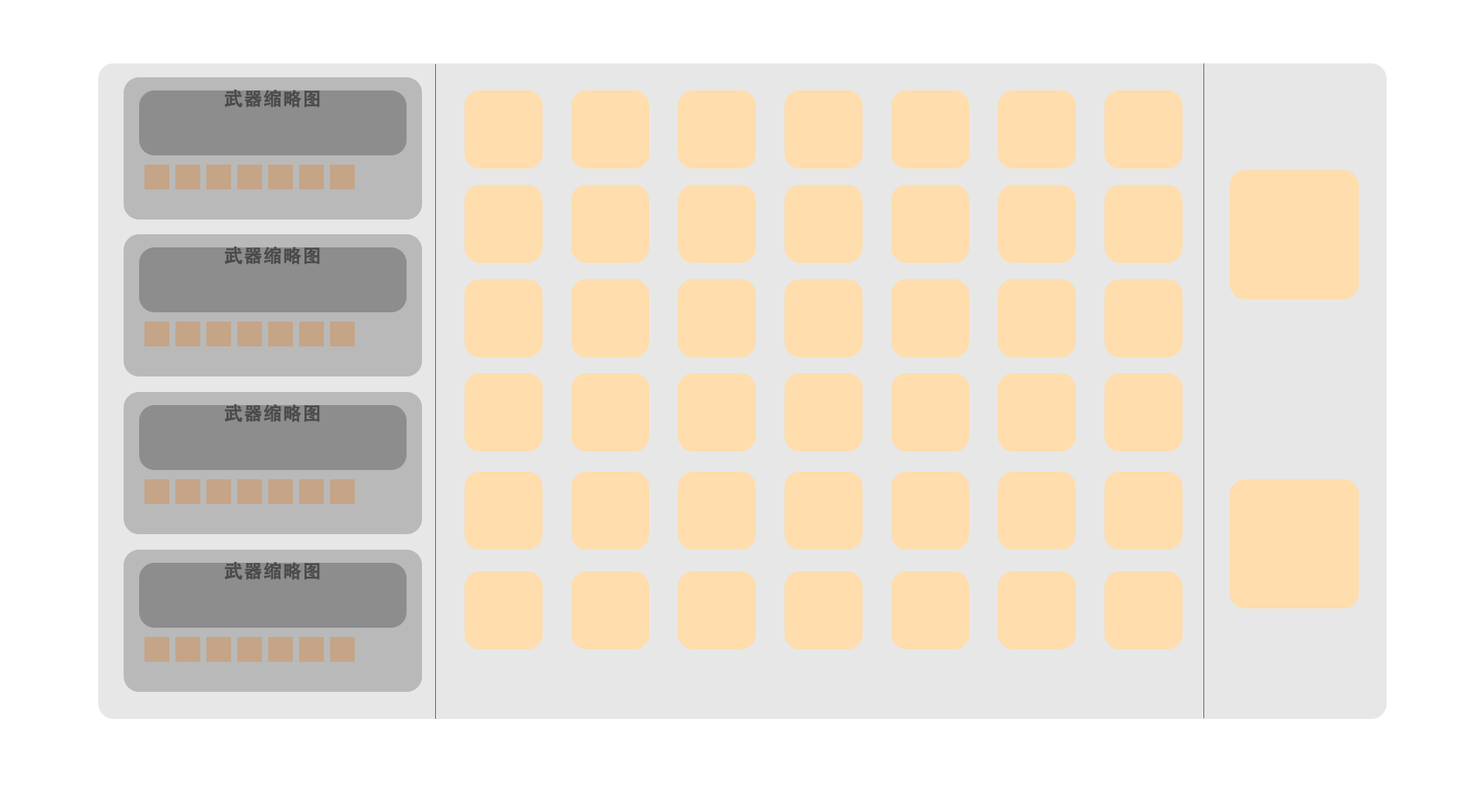
<style>
.page{position:relative;width:1484px;height:804px;background:#e7e7e7}
.page>*{position:absolute;margin:0}
.t1{font:18.5px "AdobeHeitiStd-Regular";letter-spacing:0.03em;color:#4b4b4b;font-weight:bold}
</style>
<div class="page">
<p class="t1" style="left:225px;top:89px;width:95px;height:18px">武器缩略图</p>
<p class="t1" style="left:225px;top:246px;width:95px;height:18px">武器缩略图</p>
<p class="t1" style="left:225px;top:403px;width:95px;height:19px">武器缩略图</p>
<p class="t1" style="left:225px;top:561px;width:95px;height:19px">武器缩略图</p>
</div>
